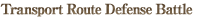
<style>
.page{position:relative;width:199px;height:19px;background:#ffffff}
.page>*{position:absolute;margin:0}
.t1{font:14px "RyuminPro-ExBold";letter-spacing:-0.08em;color:#69553d;font-weight:bold}
</style>
<div class="page">
<p class="t1" style="left:0px;top:3px;width:193px;height:14px">Transport Route Defense Battle</p>
</div>
